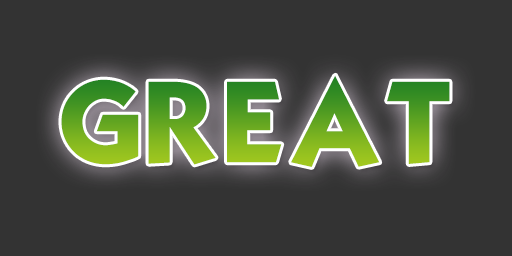
<style>
.page{position:relative;width:512px;height:256px;background:#333333}
.page>*{position:absolute;margin:0}
.t1{font:100px "KabelBdNormal"}
</style>
<div class="page">
<p class="t1" style="left:61px;top:75px;width:389px;height:92px">GREAT</p>
</div>
